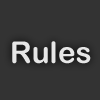
<style>
.page{position:relative;width:100px;height:100px;background:#333333}
.page>*{position:absolute;margin:0}
.t1{font:29.9px "ArialRoundedMTBold";color:#e6e6e6}
</style>
<div class="page">
<p class="t1" style="left:12px;top:41px;width:79px;height:23px">Rules</p>
</div>
